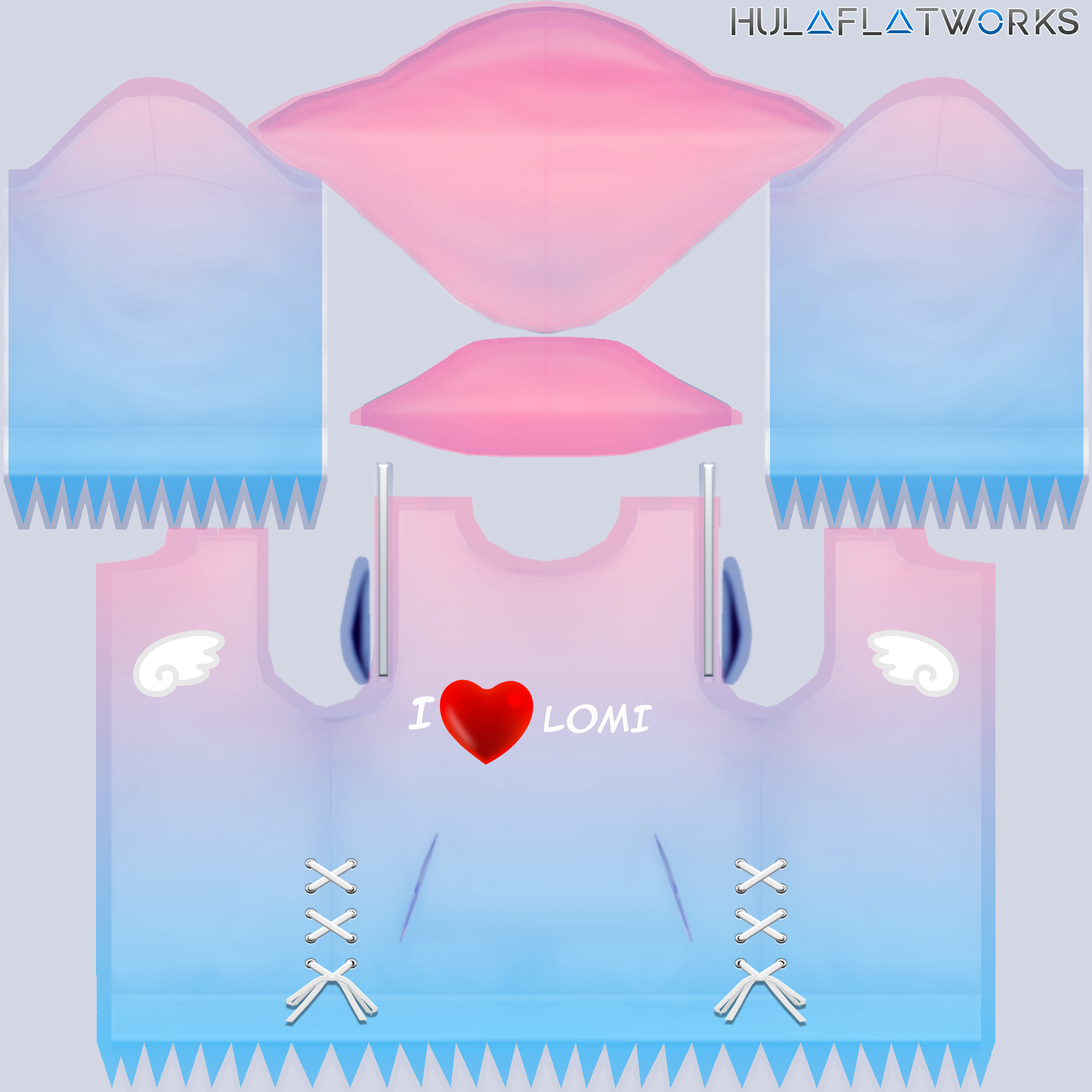
<style>
.page{position:relative;width:1092px;height:1092px;background:#d3d7e4}
.page>*{position:absolute;margin:0}
.t1{font:38.2px "AnimeAce2.0BB";letter-spacing:0.01em;color:#fdfdfd;font-weight:bold;font-style:italic}
.t2{font:32px "AnimeAce2.0BB";letter-spacing:0.01em;color:#fdfdfd;font-weight:bold;font-style:italic}
</style>
<div class="page">
<p class="t1" style="left:408px;top:696px;width:27px;height:33px">I</p>
<p class="t2" style="left:543px;top:704px;width:109px;height:29px">LOMI</p>
</div>
